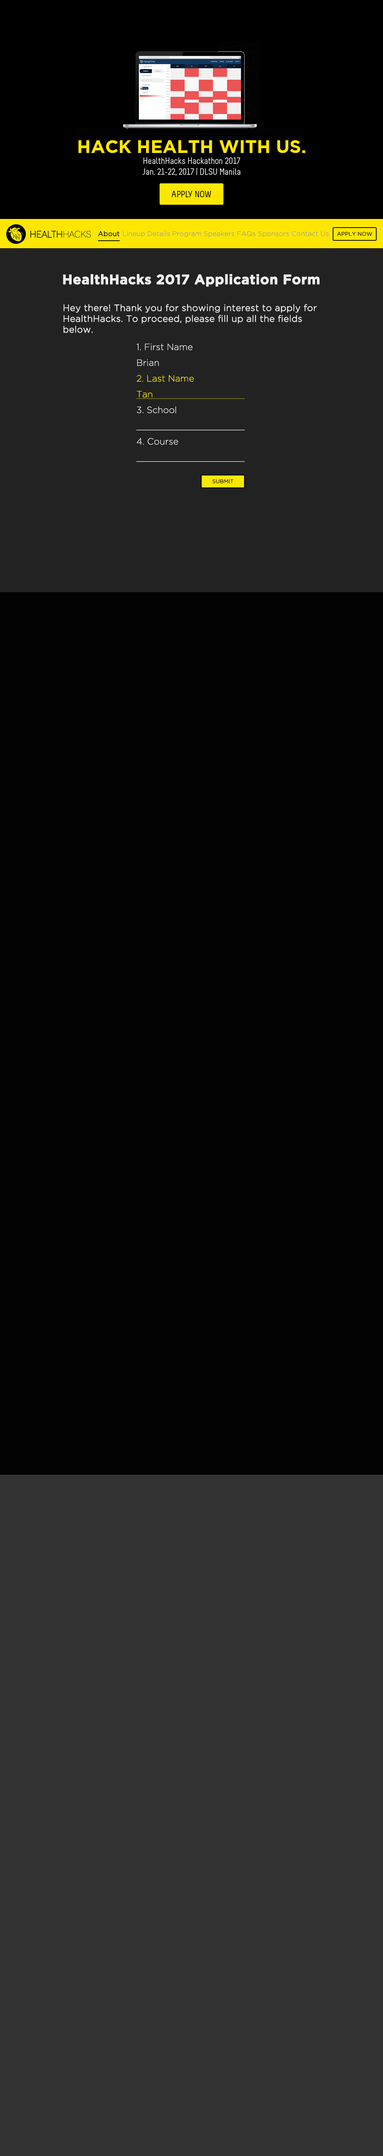
<style>
.page{position:relative;width:383px;height:2156px;background:#030303}
.page>*{position:absolute;margin:0}
.t1{font:9px "Melbourne";color:#eeeeee}
.t2{font:18px "GothamBold";color:#fde700}
.t3{font:9px "Lane-Narrow";color:#000000;font-weight:bold}
.t4{font:9px "Lane-Narrow";color:#000000}
.t5{font:6.8px "GothamLight";color:#000000;font-weight:bold}
.t6{font:6.8px "GothamLight";color:#999999}
.t7{font:6.8px "GothamLight";color:#fde700;font-weight:bold}
.t8{font:5.3px "GothamLight";color:#020202;font-weight:bold}
.t9{font:13.5px "GothamBold";color:#eeeeee;font-weight:bold}
.t10{font:9px "GothamLight";color:#eeeeee;font-weight:bold}
.t11{font:9px/15.8px "GothamLight";color:#eeeeee}
.t12{font:9px/15.8px "GothamLight";color:#fde700}
.t13{font:9px/15.8px "GothamLight";color:#fde700;text-decoration:underline}
</style>
<div class="page">
<p class="t1" style="left:78px;top:140px;width:227px;height:36px;text-align:center"><span class="t2">HACK HEALTH WITH US.<br></span>HealthHacks Hackathon 2017<br>Jan. 21-22, 2017 | DLSU Manila</p>
<p class="t3" style="left:30px;top:231px;width:61px;height:7px">HEALTH<span class="t4">HACKS</span></p>
<p class="t5" style="left:98px;top:231px;width:22px;height:5px">About</p>
<p class="t6" style="left:103px;top:231px;width:226px;height:6px"><span class="t7">Abo  </span>Lineup Details Program Speakers FAQs Sponsors Contact Us</p>
<p class="t8" style="left:336px;top:232px;width:36px;height:4px">APPLY NOW</p>
<p class="t9" style="left:63px;top:274px;width:256px;height:13px">HealthHacks 2017 Application Form</p>
<p class="t10" style="left:63px;top:304px;width:254px;height:29px">Hey there! Thank you for showing interest to apply for HealthHacks. To proceed, please fill up all the fields below.</p>
<p class="t11" style="left:136px;top:344px;width:109px;height:118px">1. First Name<br>Brian<br><span class="t12">2. Last Name<br></span><span class="t13">Tan                                  <br></span>3. School<br>____________________<br>4. Course<br>____________________</p>
<p class="t8" style="left:212px;top:479px;width:21px;height:4px">SUBMIT</p>
</div>
